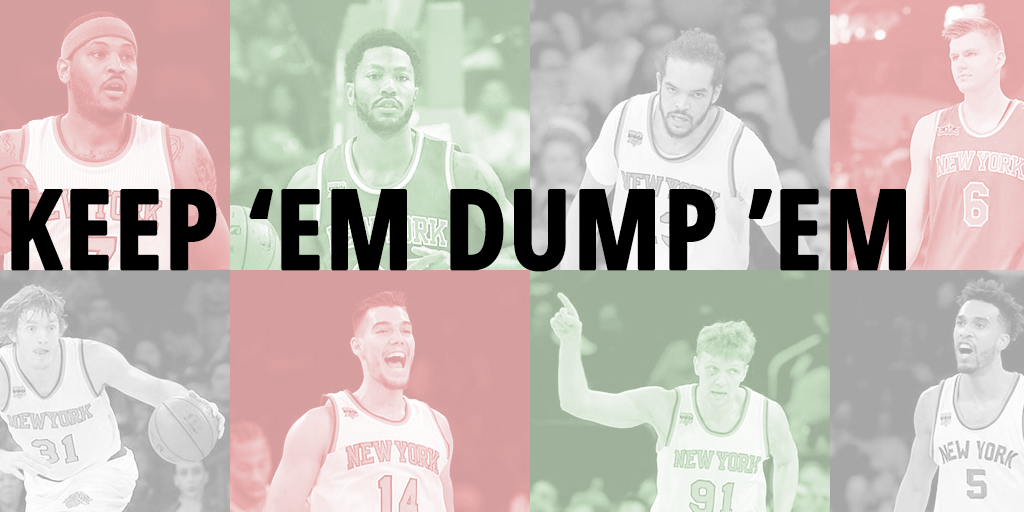
<style>
.page{position:relative;width:1024px;height:512px}
.page>*{position:absolute;margin:0}
.t1{font:110px "OpenSans-CondensedBold";color:#000000;font-weight:bold}
</style>
<div class="page">
<p class="t1" style="left:11px;top:189px;width:895px;height:83px">KEEP ‘EM DUMP ’EM</p>
</div>
